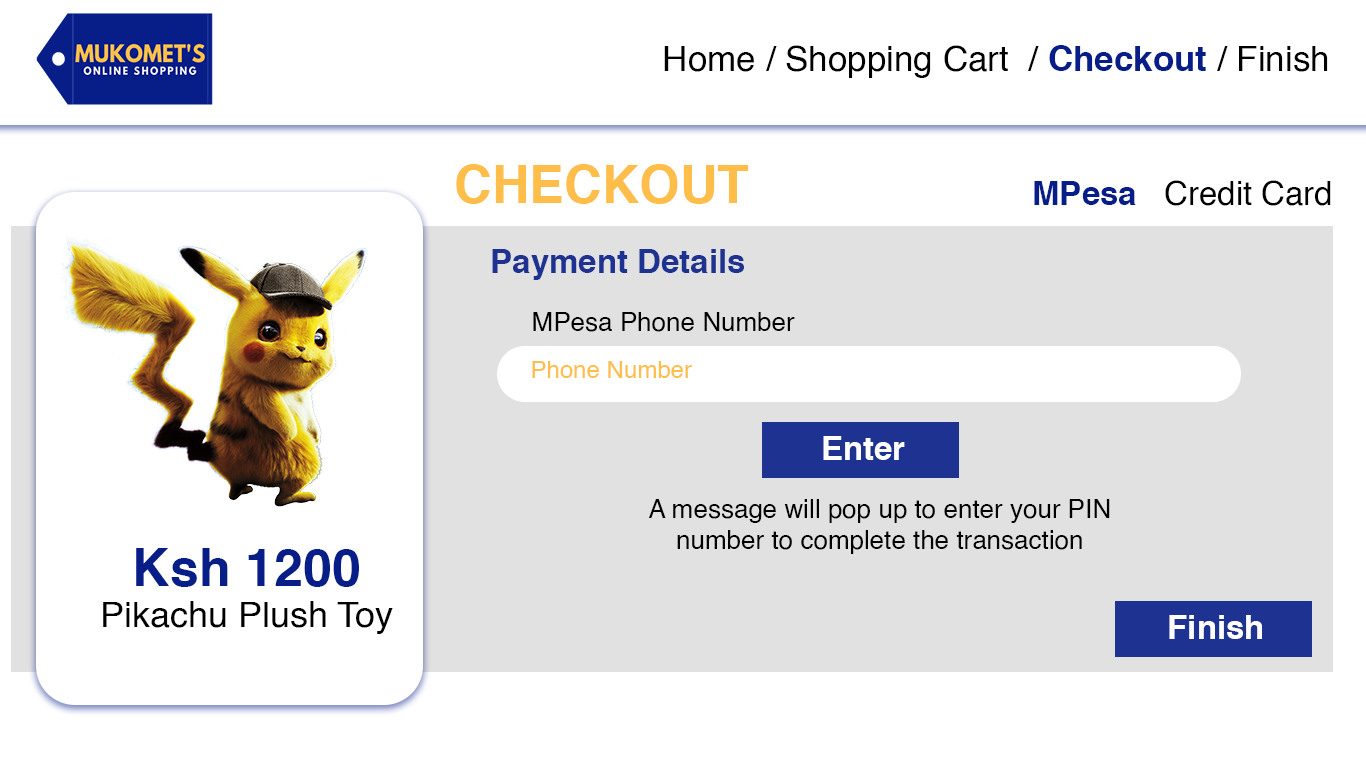
<style>
.page{position:relative;width:1366px;height:768px;background:#ffffff}
.page>*{position:absolute;margin:0}
.t1{font:35px "Helvetica";color:#010100}
.t2{font:35px "Helvetica-Bold";color:#071e89}
.t3{font:52px "Helvetica-Bold";color:#ffbd4a}
.t4{font:33px "Helvetica";color:#000000}
.t5{font:33px "Helvetica-Bold";color:#071e89}
.t6{font:33px "Helvetica-Bold";color:#1e3292}
.t7{font:26px "Helvetica";color:#000000}
.t8{font:24px "Helvetica";color:#ffbd4a}
.t9{font:33px "Helvetica-Bold";color:#ffffff}
.t10{font:52px "Helvetica-Bold";color:#071e89}
.t11{font:36px "Helvetica";color:#000000}
</style>
<div class="page">
<p class="t1" style="left:664px;top:45px;width:664px;height:33px">Home / Shopping Cart  / <span class="t2">Checkout </span>/ Finish</p>
<p class="t3" style="left:456px;top:164px;width:293px;height:40px">CHECKOUT</p>
<p class="t4" style="left:1034px;top:180px;width:297px;height:26px"><span class="t5">MPesa   </span>Credit Card</p>
<p class="t6" style="left:492px;top:249px;width:252px;height:31px">Payment Details</p>
<p class="t7" style="left:533px;top:312px;width:262px;height:20px">MPesa Phone Number</p>
<p class="t8" style="left:532px;top:361px;width:160px;height:17px">Phone Number</p>
<p class="t9" style="left:823px;top:436px;width:82px;height:24px">Enter</p>
<p class="t7" style="left:648px;top:499px;width:462px;height:55px;text-align:center">A message will pop up to enter your PIN <br>number to complete the transaction</p>
<p class="t10" style="left:136px;top:548px;width:223px;height:39px">Ksh 1200</p>
<p class="t11" style="left:103px;top:601px;width:290px;height:33px">Pikachu Plush Toy</p>
<p class="t9" style="left:1169px;top:615px;width:93px;height:24px">Finish</p>
</div>
